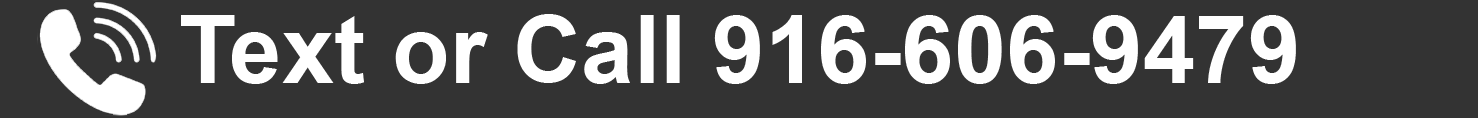
<style>
.page{position:relative;width:1478px;height:118px;background:#333333}
.page>*{position:absolute;margin:0}
.t1{font:94.4px "Arial-BoldMT";color:#ffffff}
</style>
<div class="page">
<p class="t1" style="left:181px;top:14px;width:1115px;height:70px">Text or Call 916-606-9479</p>
</div>
